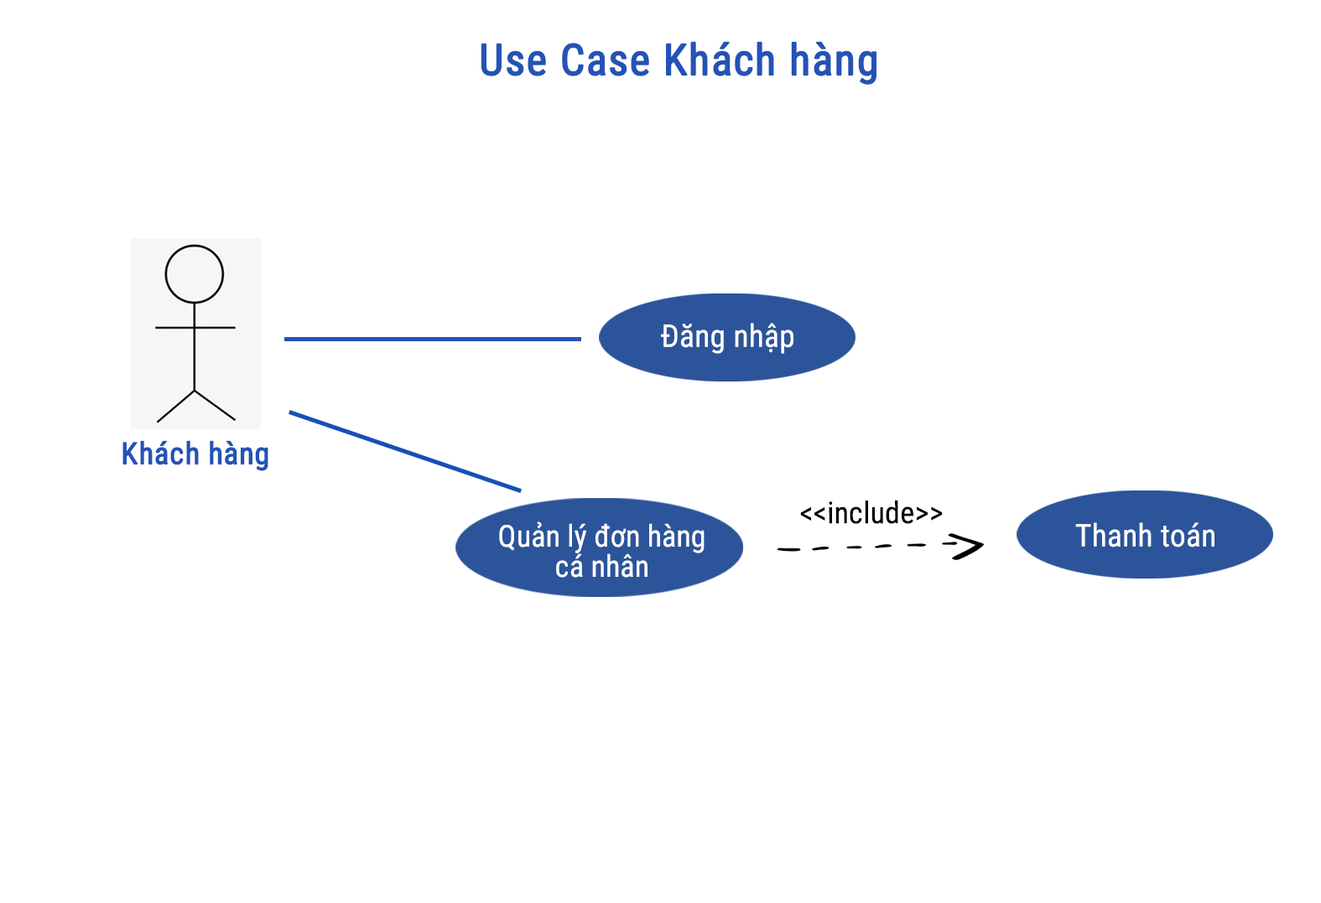
<style>
.page{position:relative;width:1321px;height:903px;background:#ffffff}
.page>*{position:absolute;margin:0}
.t1{font:43.3px "RobotoCondensed-Regular";letter-spacing:0.01em;color:#2353b6;font-weight:bold}
.t2{font:31.3px "RobotoCondensed-Regular";letter-spacing:0.01em;color:#ffffff}
.t3{font:30.2px "RobotoCondensed-Regular";letter-spacing:0.01em;color:#2353b6;font-weight:bold}
.t4{font:30.2px "RobotoCondensed-Regular";letter-spacing:0.01em;color:#000000}
.t5{font:30.2px/30.2px "RobotoCondensed-Regular";letter-spacing:0.01em;color:#ffffff}
</style>
<div class="page">
<p class="t1" style="left:480px;top:41px;width:396px;height:44px">Use Case Khách hàng</p>
<p class="t2" style="left:661px;top:323px;width:132px;height:31px">Đăng nhập</p>
<p class="t3" style="left:122px;top:440px;width:146px;height:31px">Khách hàng</p>
<p class="t4" style="left:800px;top:500px;width:142px;height:24px">&lt;&lt;include&gt;&gt;</p>
<p class="t5" style="left:499px;top:522px;width:205px;height:56px;text-align:center">Quản lý đơn hàng<br>cá nhân</p>
<p class="t2" style="left:1075px;top:522px;width:139px;height:25px">Thanh toán</p>
</div>
